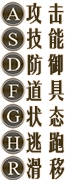
<style>
.page{position:relative;width:66px;height:180px;background:#ffffff}
.page>*{position:absolute;margin:0}
.t1{font:21.3px "FZYTK--GBK1-0";color:#3f3216;font-weight:bold}
</style>
<div class="page">
<p class="t1" style="left:26px;top:2px;width:38px;height:22px">攻击</p>
<p class="t1" style="left:27px;top:28px;width:37px;height:22px">技能</p>
<p class="t1" style="left:27px;top:54px;width:36px;height:22px">防御</p>
<p class="t1" style="left:26px;top:80px;width:38px;height:21px">道具</p>
<p class="t1" style="left:26px;top:105px;width:38px;height:23px">状态</p>
<p class="t1" style="left:26px;top:132px;width:38px;height:21px">逃跑</p>
<p class="t1" style="left:26px;top:157px;width:39px;height:23px">滑移</p>
</div>
